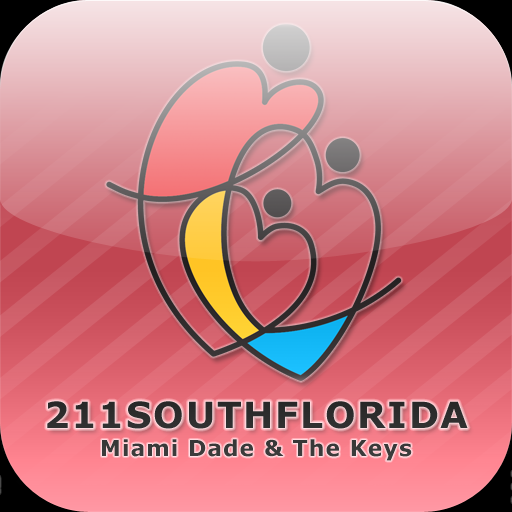
<style>
.page{position:relative;width:512px;height:512px}
.page>*{position:absolute;margin:0}
.t1{font:36px "Verdana-Bold";letter-spacing:0.05em;color:#2d2d2d}
.t2{font:22px "Verdana-Bold";letter-spacing:0.05em;color:#3a3a3a}
</style>
<div class="page">
<p class="t1" style="left:47px;top:401px;width:421px;height:28px">211SOUTHFLORIDA</p>
<p class="t2" style="left:102px;top:439px;width:310px;height:22px">Miami Dade &amp; The Keys</p>
</div>
